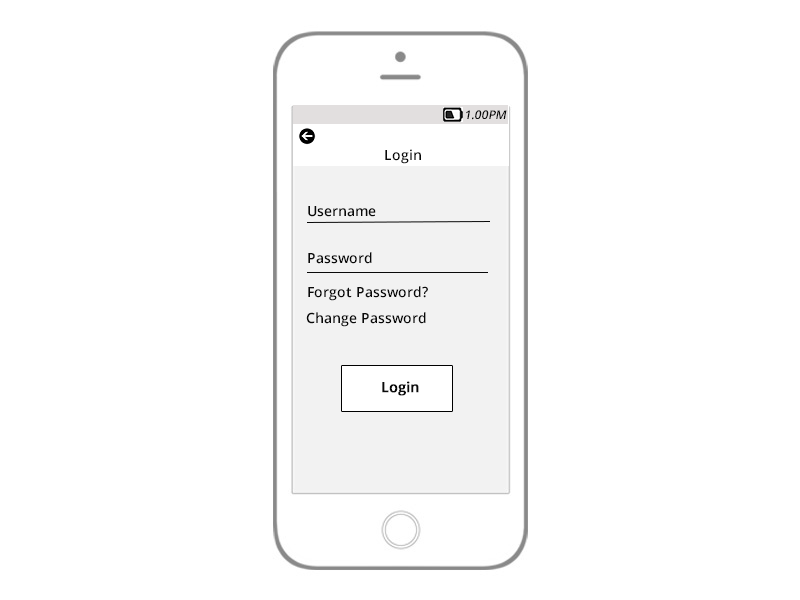
<style>
.page{position:relative;width:800px;height:600px;background:#ffffff}
.page>*{position:absolute;margin:0}
.t1{font:12px "OpenSans-Semibold";color:#090909;font-style:italic}
.t2{font:14px "OpenSans-Semibold";color:#090909}
.t3{font:14px "OpenSans-Semibold";color:#090909;font-weight:bold}
.t4{font:18px "MyriadPro-Regular";color:#090909}
</style>
<div class="page">
<p class="t1" style="left:466px;top:110px;width:41px;height:10px">1.00PM</p>
<p class="t2" style="left:385px;top:149px;width:36px;height:15px">Login</p>
<p class="t2" style="left:308px;top:206px;width:68px;height:11px">Username</p>
<p class="t2" style="left:308px;top:252px;width:64px;height:12px">Password</p>
<p class="t2" style="left:308px;top:286px;width:120px;height:15px">Forgot Password?</p>
<p class="t2" style="left:306px;top:312px;width:120px;height:15px">Change Password</p>
<p class="t3" style="left:382px;top:381px;width:37px;height:15px"><span class="t4">        <br>       <br>         </span>Login</p>
</div>
